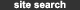
<style>
.page{position:relative;width:80px;height:10px;background:#333333}
.page>*{position:absolute;margin:0}
.t1{font:10px "Arial-BoldMT";color:#ffffff}
</style>
<div class="page">
<p class="t1" style="left:14px;top:0px;width:52px;height:12px">site search</p>
</div>
